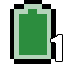
<style>
.page{position:relative;width:64px;height:64px;background:#ffffff}
.page>*{position:absolute;margin:0}
.t1{font:33.3px "Impact";color:#ffffff}
</style>
<div class="page">
<p class="t1" style="left:51px;top:35px;width:11px;height:26px">1</p>
</div>
